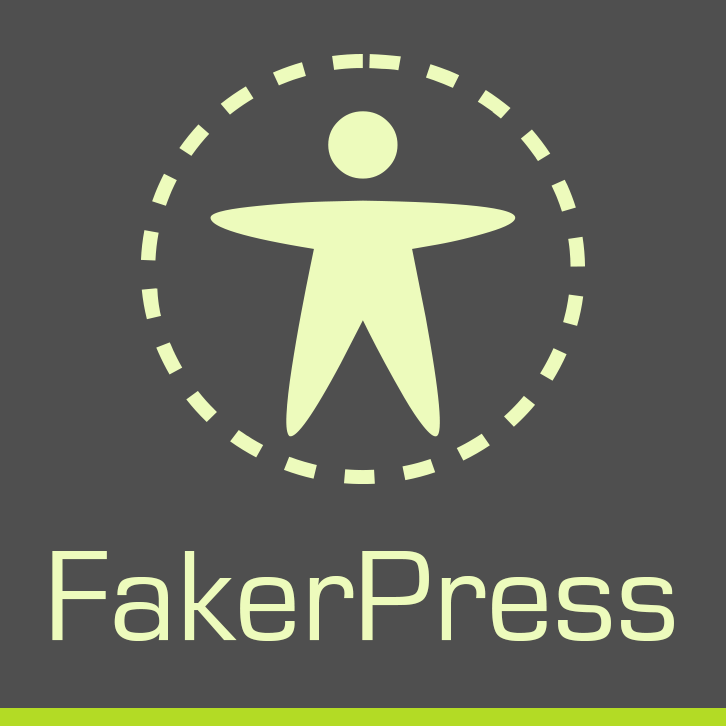
<style>
.page{position:relative;width:726px;height:726px;background:#4f4f4f}
.page>*{position:absolute;margin:0}
.t1{font:132.9px "EurostileRegular";color:#edfbbc}
</style>
<div class="page">
<p class="t1" style="left:52px;top:551px;width:622px;height:90px">FakerPress</p>
</div>
